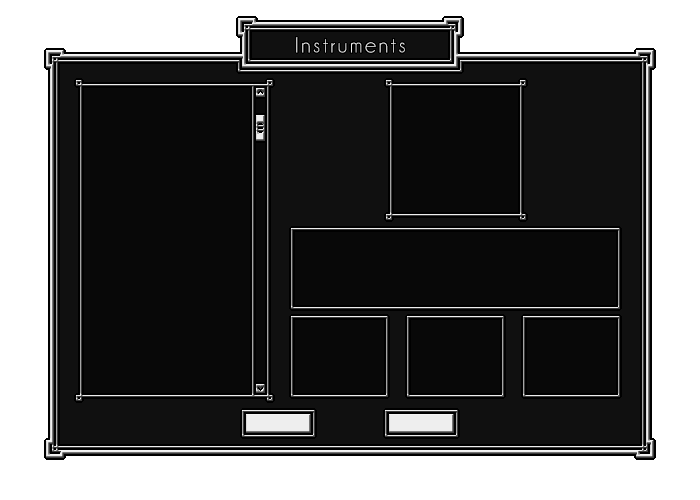
<style>
.page{position:relative;width:700px;height:500px;background:#080808}
.page>*{position:absolute;margin:0}
.t1{font:22px "Champagne&Limousines";letter-spacing:0.12em;color:#eeeeee}
</style>
<div class="page">
<p class="t1" style="left:296px;top:37px;width:109px;height:16px">Instruments</p>
</div>
